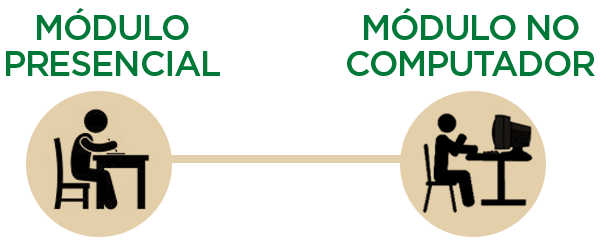
<style>
.page{position:relative;width:600px;height:246px;background:#ffffff}
.page>*{position:absolute;margin:0}
.t1{font:34.9px/35.9px "Gotham-Medium";letter-spacing:-0.04em;color:#007938}
</style>
<div class="page">
<p class="t1" style="left:6px;top:8px;width:214px;height:68px;text-align:center">MÓDULO<br>PRESENCIAL</p>
<p class="t1" style="left:347px;top:8px;width:248px;height:68px;text-align:center">MÓDULO NO<br>COMPUTADOR</p>
</div>
